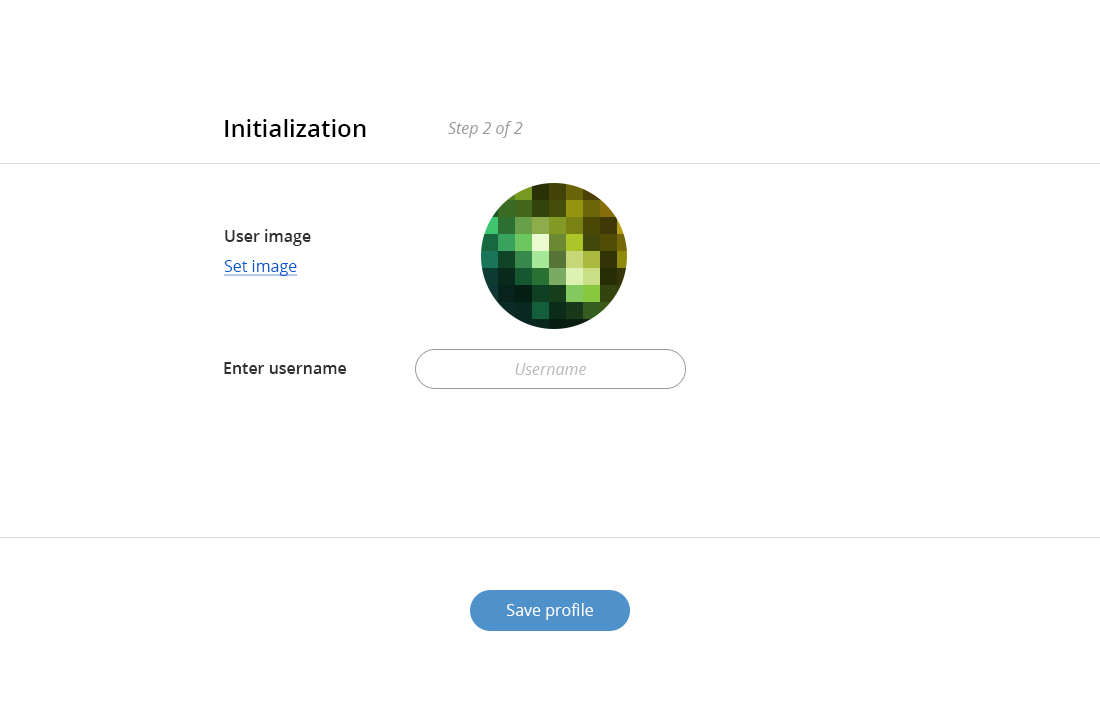
<style>
.page{position:relative;width:1100px;height:711px;background:#ffffff}
.page>*{position:absolute;margin:0}
.t1{font:24px "OpenSans-Semibold";color:#000000}
.t2{font:16px "OpenSans-Italic";color:#999999}
.t3{font:16px "OpenSans-Semibold";color:#303030}
.t4{font:16px "OpenSans";color:#0259cf;text-decoration:underline}
.t5{font:16px "OpenSans-Italic";color:#b9b9b9}
.t6{font:16px "OpenSans";color:#ffffff}
</style>
<div class="page">
<p class="t1" style="left:225px;top:119px;width:141px;height:18px">Initialization</p>
<p class="t2" style="left:448px;top:121px;width:75px;height:17px">Step 2 of 2</p>
<p class="t3" style="left:225px;top:229px;width:86px;height:17px">User image</p>
<p class="t4" style="left:224px;top:260px;width:74px;height:16px">Set image</p>
<p class="t3" style="left:224px;top:362px;width:123px;height:12px">Enter username</p>
<p class="t5" style="left:515px;top:363px;width:71px;height:12px">Username</p>
<p class="t6" style="left:507px;top:603px;width:86px;height:17px">Save profile</p>
</div>
